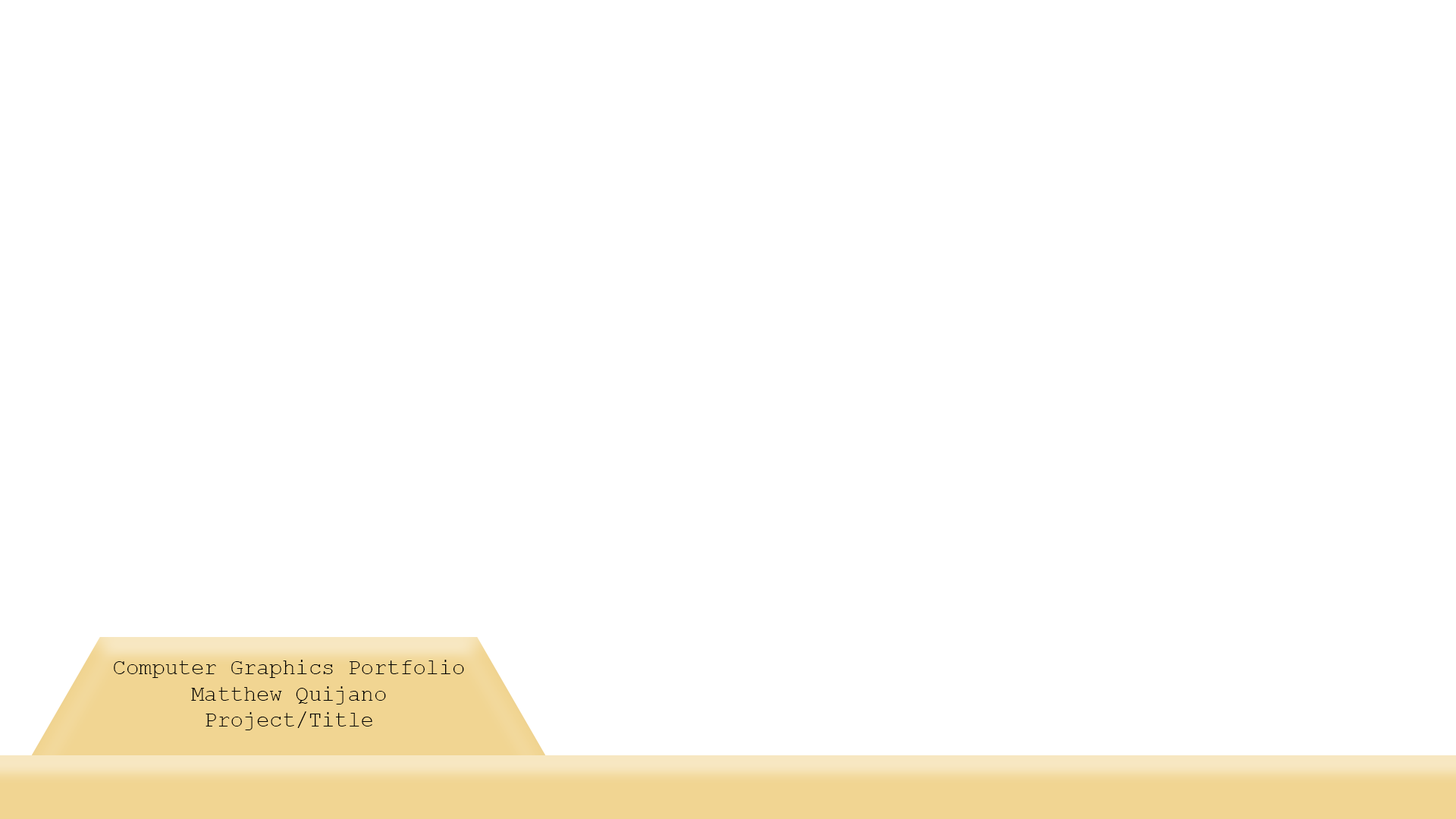
<style>
.page{position:relative;width:1456px;height:819px;background:#ffffff}
.page>*{position:absolute;margin:0}
.t1{font:21.8px "CourierNewPSMT";color:#000000}
</style>
<div class="page">
<p class="t1" style="left:114px;top:660px;width:350px;height:70px;text-align:center">Computer Graphics Portfolio<br>Matthew Quijano<br>Project/Title</p>
</div>
